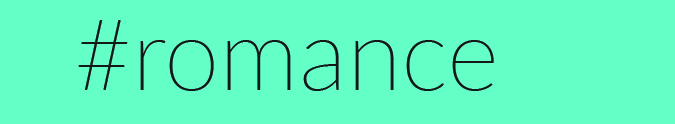
<style>
.page{position:relative;width:675px;height:124px;background:#63ffc6}
.page>*{position:absolute;margin:0}
.t1{font:100px "Lato-Thin";color:#141819}
</style>
<div class="page">
<p class="t1" style="left:78px;top:20px;width:416px;height:71px">#romance</p>
</div>
